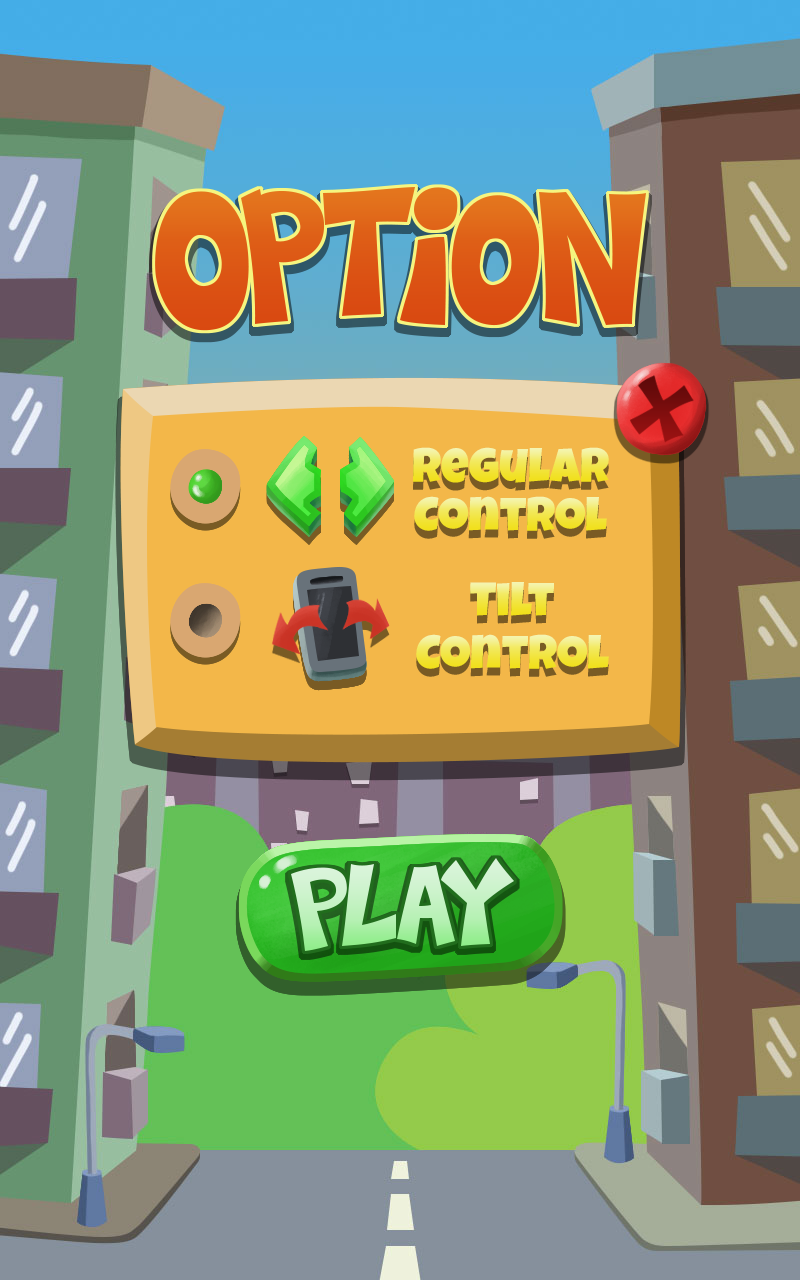
<style>
.page{position:relative;width:800px;height:1280px}
.page>*{position:absolute;margin:0}
.t1{font:48px "LuckiestGuy-Regular"}
</style>
<div class="page">
<p class="t1" style="left:413px;top:447px;width:196px;height:36px">Regular</p>
<p class="t1" style="left:414px;top:496px;width:193px;height:35px">Control</p>
<p class="t1" style="left:470px;top:582px;width:84px;height:34px">Tilt</p>
<p class="t1" style="left:416px;top:634px;width:193px;height:35px">Control</p>
</div>
